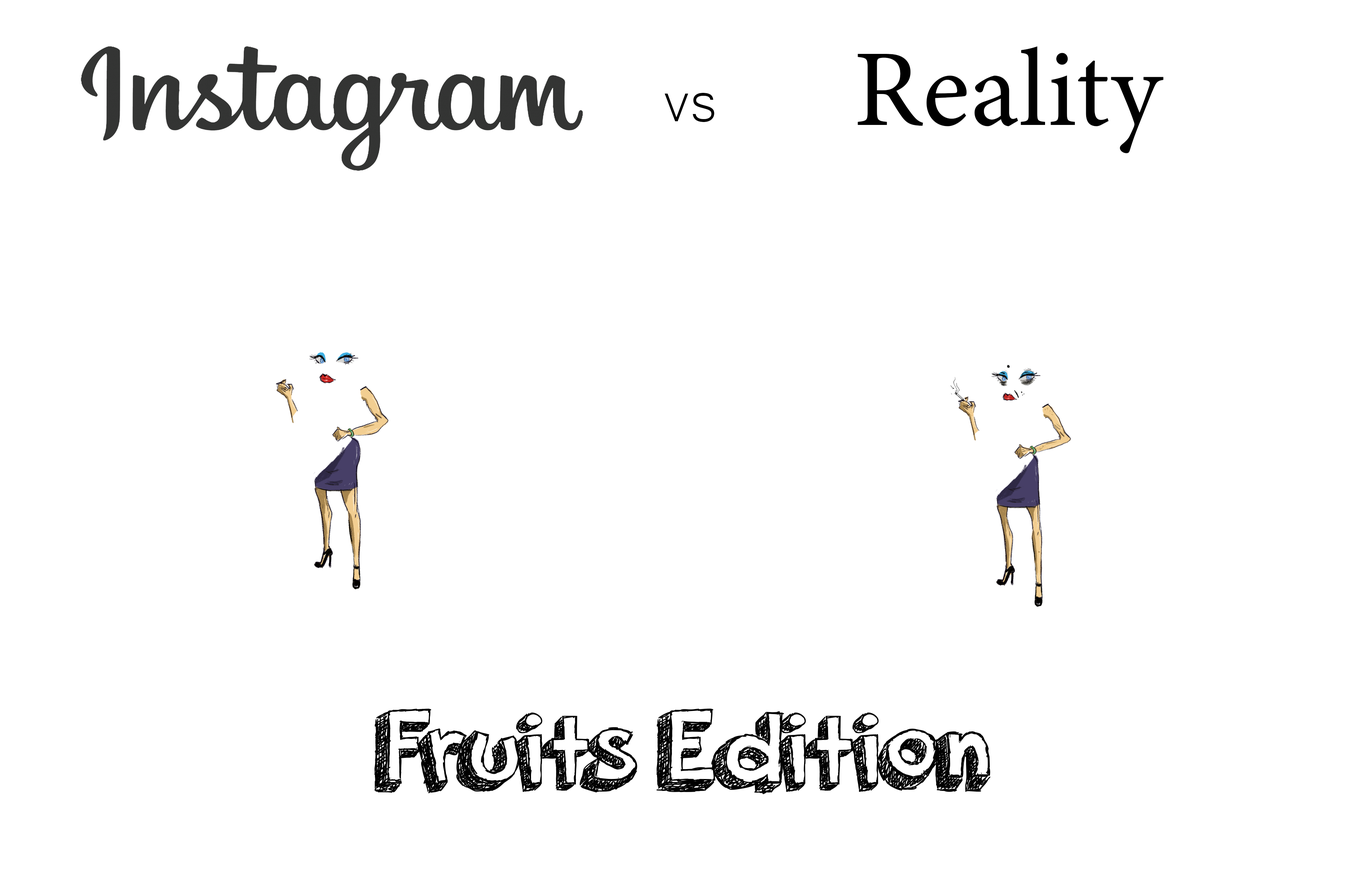
<style>
.page{position:relative;width:1365px;height:874px;background:#ffffff}
.page>*{position:absolute;margin:0}
.t1{font:109.2px "MinionVariableConcept-Roman";color:#000000}
.t2{font:72.8px "Microsoft-Yi-Baiti";color:#000000}
.t3{font:117.2px "orangejuice";color:#000000}
</style>
<div class="page">
<p class="t1" style="left:858px;top:46px;width:305px;height:107px">Reality</p>
<p class="t2" style="left:665px;top:93px;width:50px;height:29px">vs</p>
<p class="t3" style="left:374px;top:708px;width:616px;height:86px">Fruits Edition</p>
</div>
